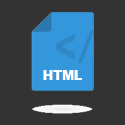
<style>
.page{position:relative;width:125px;height:125px;background:#333333}
.page>*{position:absolute;margin:0}
.t1{font:12.5px "Arial-Black";color:#ffffff}
</style>
<div class="page">
<p class="t1" style="left:43px;top:70px;width:39px;height:10px">HTML</p>
</div>
